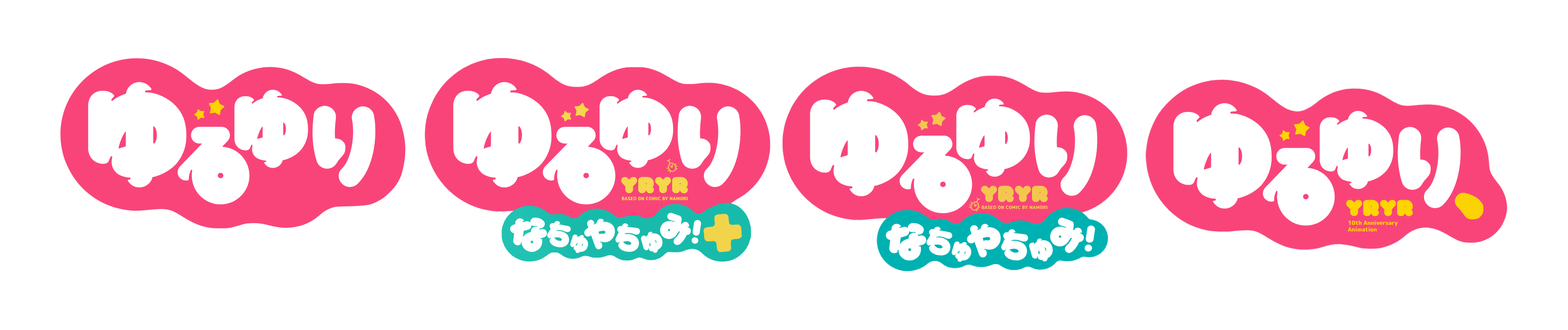
<style>
.page{position:relative;width:1568px;height:330px;background:#ffffff}
.page>*{position:absolute;margin:0}
.t1{font:113.2px "VALkana-Rounded";color:#ffffff}
.t2{font:84px "VALkana-Rounded";color:#ffffff}
.t3{font:16.7px "VALkana-Rounded";color:#ffd400}
.t4{font:11.3px "VALkana-Rounded";color:#ffd400}
.t5{font:87.9px "VALkana-Rounded";color:#ffffff}
.t6{font:11.1px "VALkana-Rounded";color:#f6d64a}
.t7{font:15.4px "VALkana-Rounded";color:#f6d64a}
.t8{font:15.4px "VALkana-Rounded";color:#f5c64f}
.t9{font:11.1px "VALkana-Rounded";color:#f5c64f}
.t10{font:83.7px "VALkana-Rounded";color:#ffffff}
.t11{font:22.7px "VAL";letter-spacing:0.02em;color:#f6d64a;font-weight:bold}
.t12{font:22.7px "VAL";letter-spacing:0.02em;color:#f5c64f;font-weight:bold}
.t13{font:4.5px "RoundedMplus1c-ExtraBold";color:#f6d64a;font-weight:bold}
.t14{font:4.5px "RoundedMplus1c-ExtraBold";color:#f5c64f;font-weight:bold}
.t15{font:22.7px "VAL";letter-spacing:0.02em;color:#ffd400;font-weight:bold}
.t16{font:38.5px "VALkana-Rounded";color:#ffffff;scale:1.04 1}
.t17{font:27.5px "VALkana-Rounded";color:#ffffff}
.t18{font:33.3px "VALkana-Rounded";color:#ffffff}
.t19{font:32.6px "VALkana-Rounded";color:#ffffff}
.t20{font:25.8px "VALkana-Rounded";color:#ffffff;scale:1.06 1}
.t21{font:35.7px "VALkana-Rounded";color:#ffffff}
.t22{font:5.7px/6.6px "RoundedMplus1c-ExtraBold";letter-spacing:-0.02em;color:#ffd400;font-weight:bold}
.t23{font:30.2px "VALkana-Rounded";color:#ffffff}
.t24{font:29.4px "VALkana-Rounded";color:#ffffff}
.t25{font:42.2px "VALkana-Rounded";color:#ffffff;scale:1.04 1}
.t26{font:30.1px "VALkana-Rounded";color:#ffffff}
.t27{font:36.5px "VALkana-Rounded";color:#ffffff}
.t28{font:33px "VALkana-Rounded";color:#ffffff}
.t29{font:28.2px "VALkana-Rounded";color:#ffffff;scale:1.06 1}
.t30{font:25.4px "VALkana-Rounded";color:#ffffff}
.t31{font:27.8px "VALkana-Rounded";color:#ffffff}
.t32{font:32.2px "VALkana-Rounded";color:#ffffff}
</style>
<div class="page">
<p class="t1" style="left:88px;top:82px;width:99px;height:106px">ゆ</p>
<p class="t2" style="left:234px;top:90px;width:74px;height:78px">ゆ</p>
<p class="t1" style="left:453px;top:82px;width:99px;height:106px">ゆ</p>
<p class="t2" style="left:599px;top:90px;width:74px;height:78px">ゆ</p>
<p class="t3" style="left:209px;top:99px;width:16px;height:16px;rotate:11deg">★</p>
<p class="t1" style="left:810px;top:91px;width:99px;height:105px">ゆ</p>
<p class="t2" style="left:956px;top:99px;width:74px;height:78px">ゆ</p>
<p class="t4" style="left:194px;top:109px;width:11px;height:11px;rotate:-18deg">★</p>
<p class="t5" style="left:312px;top:106px;width:64px;height:81px">り</p>
<p class="t6" style="left:561px;top:111px;width:10px;height:11px;rotate:-18deg">★</p>
<p class="t7" style="left:574px;top:103px;width:15px;height:15px;rotate:11deg">★</p>
<p class="t5" style="left:677px;top:106px;width:64px;height:81px">り</p>
<p class="t8" style="left:931px;top:111px;width:15px;height:15px;rotate:11deg">★</p>
<p class="t1" style="left:1173px;top:103px;width:99px;height:106px">ゆ</p>
<p class="t2" style="left:1320px;top:111px;width:74px;height:78px">ゆ</p>
<p class="t9" style="left:917px;top:120px;width:11px;height:10px;rotate:-18deg">★</p>
<p class="t5" style="left:1034px;top:115px;width:64px;height:81px">り</p>
<p class="t3" style="left:1294px;top:120px;width:16px;height:17px;rotate:11deg">★</p>
<p class="t10" style="left:178px;top:127px;width:72px;height:78px">る</p>
<p class="t10" style="left:543px;top:127px;width:73px;height:78px">る</p>
<p class="t10" style="left:899px;top:136px;width:74px;height:78px">る</p>
<p class="t4" style="left:1279px;top:130px;width:11px;height:11px;rotate:-18deg">★</p>
<p class="t5" style="left:1398px;top:127px;width:63px;height:81px">り</p>
<p class="t10" style="left:1263px;top:148px;width:72px;height:78px">る</p>
<p class="t11" style="left:621px;top:177px;width:67px;height:17px">YRYR</p>
<p class="t12" style="left:981px;top:186px;width:67px;height:17px">YRYR</p>
<p class="t13" style="left:622px;top:197px;width:66px;height:3px">BASED 0N C0MIC BY NAM0RI</p>
<p class="t14" style="left:982px;top:206px;width:65px;height:3px">BASED 0N C0MIC BY NAM0RI</p>
<p class="t15" style="left:1346px;top:200px;width:67px;height:17px">YRYR</p>
<p class="t16" style="left:510px;top:218px;width:37px;height:34px;rotate:-15deg">な</p>
<p class="t17" style="left:547px;top:221px;width:24px;height:27px;rotate:11deg">ち</p>
<p class="t18" style="left:584px;top:219px;width:31px;height:31px">や</p>
<p class="t19" style="left:660px;top:213px;width:31px;height:32px;rotate:20deg">み</p>
<p class="t20" style="left:692px;top:220px;width:9px;height:24px;rotate:9deg">！</p>
<p class="t21" style="left:1050px;top:218px;width:34px;height:35px;rotate:20deg">み</p>
<p class="t22" style="left:1348px;top:221px;width:50px;height:11px">10th Anniversary<br>Animation</p>
<p class="t23" style="left:615px;top:223px;width:25px;height:29px;rotate:7deg">ち</p>
<p class="t24" style="left:641px;top:232px;width:22px;height:21px;rotate:-16deg">ゅ</p>
<p class="t25" style="left:886px;top:223px;width:40px;height:38px;rotate:-15deg">な</p>
<p class="t26" style="left:926px;top:227px;width:26px;height:29px;rotate:11deg">ち</p>
<p class="t27" style="left:967px;top:224px;width:34px;height:34px">や</p>
<p class="t28" style="left:1001px;top:229px;width:27px;height:32px;rotate:7deg">ち</p>
<p class="t29" style="left:1084px;top:226px;width:11px;height:26px;rotate:9deg">！</p>
<p class="t30" style="left:570px;top:235px;width:18px;height:18px;rotate:17deg">ゅ</p>
<p class="t31" style="left:951px;top:241px;width:21px;height:21px;rotate:17deg">ゅ</p>
<p class="t32" style="left:1029px;top:239px;width:24px;height:23px;rotate:-16deg">ゅ</p>
</div>
